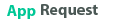
<style>
.page{position:relative;width:128px;height:19px;background:#ffffff}
.page>*{position:absolute;margin:0}
.t1{font:16px "MyriadPro-Bold";color:#00c796}
.t2{font:16px "MyriadPro-Bold";color:#4b5855}
</style>
<div class="page">
<p class="t1" style="left:7px;top:5px;width:29px;height:14px">App</p>
<p class="t2" style="left:41px;top:4px;width:57px;height:14px">Request</p>
</div>
